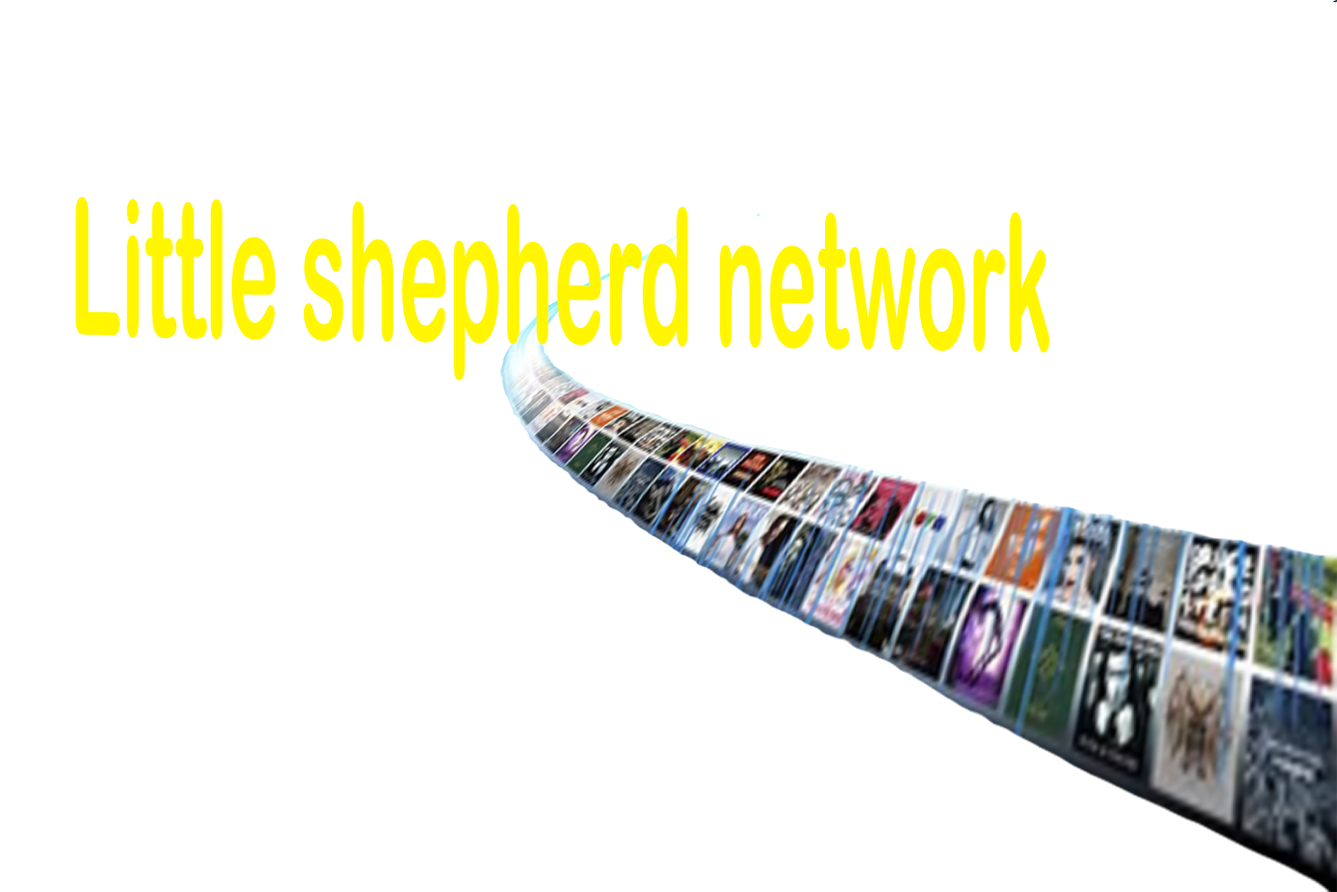
<style>
.page{position:relative;width:1337px;height:892px;background:#ffffff}
.page>*{position:absolute;margin:0}
.t1{font:188.2px "ArialRoundedMTBold";color:#fff600;scale:0.46 1}
</style>
<div class="page">
<p class="t1" style="left:75px;top:197px;width:975px;height:183px;rotate:1deg">Little shepherd network</p>
</div>
